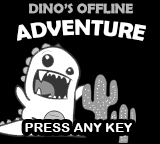
<style>
.page{position:relative;width:160px;height:144px;background:#000000}
.page>*{position:absolute;margin:0}
.t1{font:14.1px "BerlinSansFBDemi-Bold";letter-spacing:-0.008em;color:#b5b5b5}
.t2{font:21.8px "BerlinSansFBDemi-Bold";letter-spacing:-0.008em;color:#ffffff}
.t3{font:13px "ArialRoundedMTBold";letter-spacing:0.02em;color:#ffffff}
</style>
<div class="page">
<p class="t1" style="left:29px;top:3px;width:104px;height:11px">DINO’S OFFLINE</p>
<p class="t2" style="left:17px;top:19px;width:129px;height:22px">ADVENTURE</p>
<p class="t3" style="left:25px;top:123px;width:107px;height:9px">PRESS ANY KEY</p>
</div>
